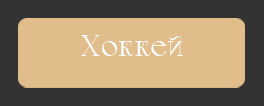
<style>
.page{position:relative;width:264px;height:106px;background:#e0bd8b}
.page>*{position:absolute;margin:0}
.t1{font:30px "Calypso-Regular";color:#ffffff}
</style>
<div class="page">
<p class="t1" style="left:81px;top:35px;width:102px;height:21px">Хоккей</p>
</div>
